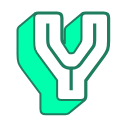
<style>
.page{position:relative;width:128px;height:128px;background:#ffffff}
.page>*{position:absolute;margin:0}
.t1{font:120px "BungeeShade-Regular"}
</style>
<div class="page">
<p class="t1" style="left:16px;top:11px;width:95px;height:105px">Y</p>
</div>
